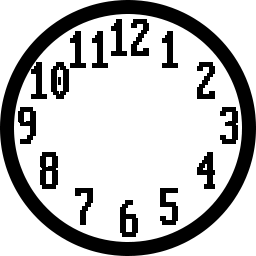
<style>
.page{position:relative;width:256px;height:256px;background:#ffffff}
.page>*{position:absolute;margin:0}
.t1{font:57px "PerfectDOSVGA437";color:#000000;font-weight:bold;scale:0.67 1}
</style>
<div class="page">
<p class="t1" style="left:111px;top:19px;width:38px;height:37px">12</p>
<p class="t1" style="left:70px;top:31px;width:38px;height:37px">11</p>
<p class="t1" style="left:162px;top:31px;width:16px;height:37px">1</p>
<p class="t1" style="left:31px;top:62px;width:38px;height:37px">10</p>
<p class="t1" style="left:197px;top:62px;width:18px;height:37px">2</p>
<p class="t1" style="left:18px;top:107px;width:18px;height:37px">9</p>
<p class="t1" style="left:220px;top:107px;width:18px;height:37px">3</p>
<p class="t1" style="left:40px;top:152px;width:18px;height:37px">8</p>
<p class="t1" style="left:197px;top:152px;width:18px;height:37px">4</p>
<p class="t1" style="left:75px;top:188px;width:18px;height:37px">7</p>
<p class="t1" style="left:160px;top:188px;width:18px;height:37px">5</p>
<p class="t1" style="left:120px;top:200px;width:18px;height:37px">6</p>
</div>
